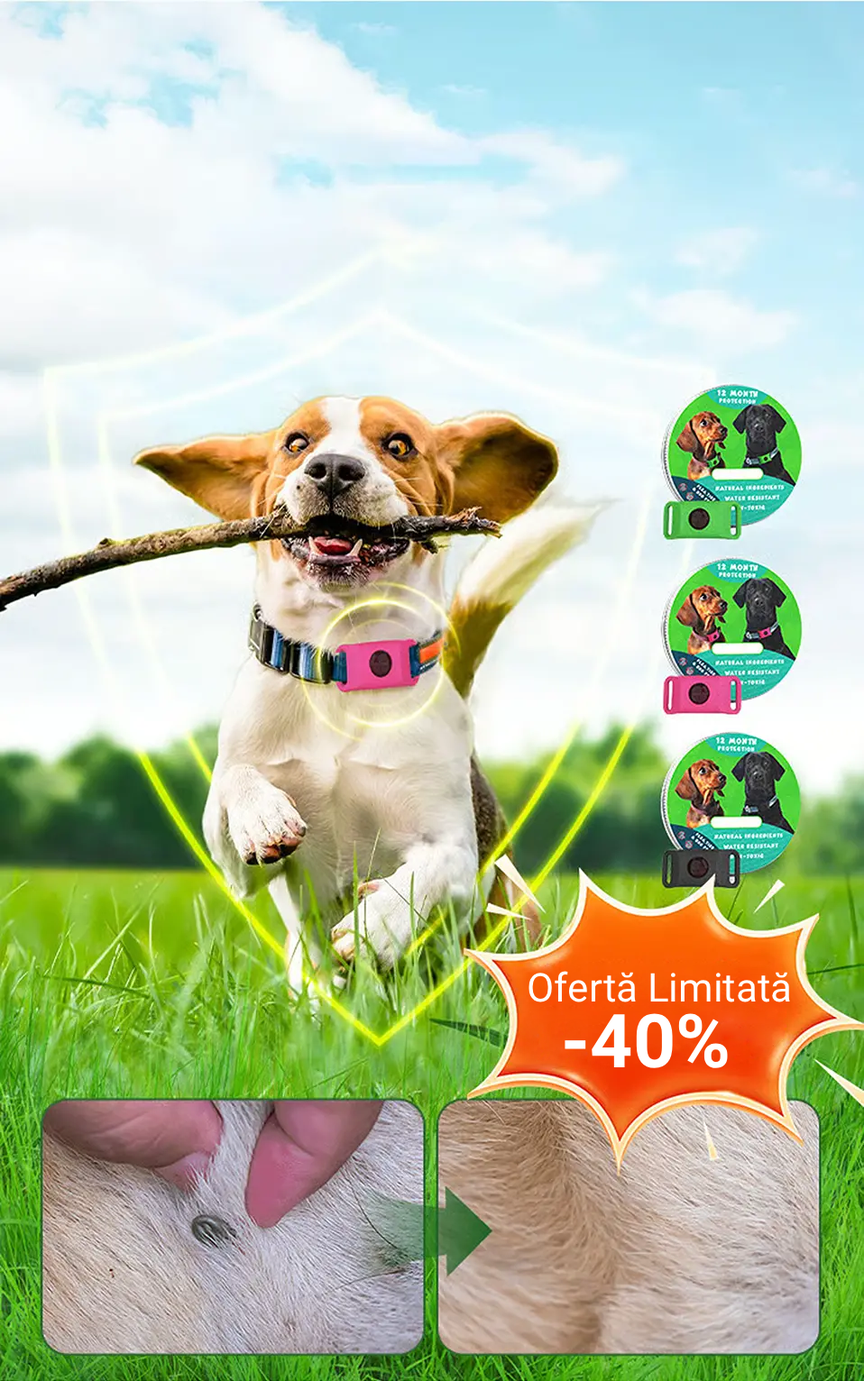
<style>
.page{position:relative;width:864px;height:1381px}
.page>*{position:absolute;margin:0}
.t1{font:39.7px "Roboto-Regular";color:#ffffff}
.t2{font:74.5px "Roboto-Bold";color:#ffffff}
</style>
<div class="page">
<p class="t1" style="left:528px;top:971px;width:262px;height:31px">Ofertă Limitată</p>
<p class="t2" style="left:564px;top:1013px;width:163px;height:55px">-40%</p>
</div>
